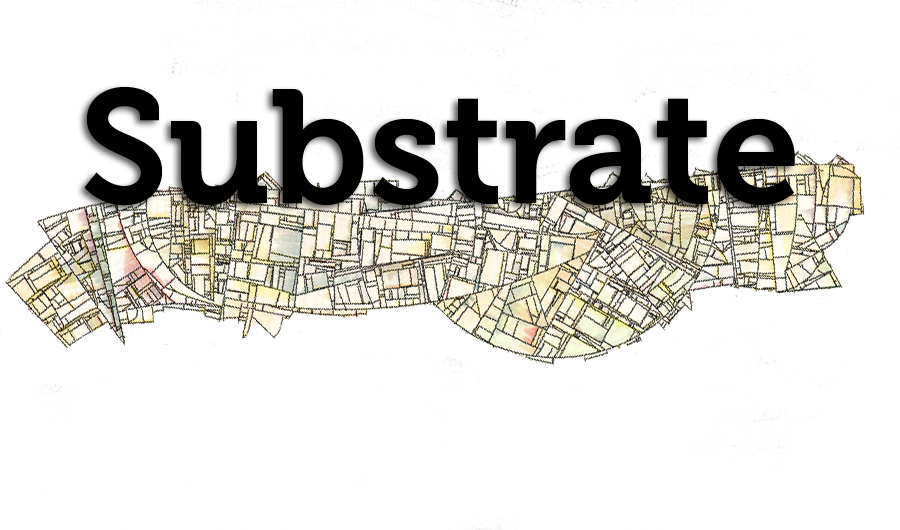
<style>
.page{position:relative;width:900px;height:530px;background:#ffffff}
.page>*{position:absolute;margin:0}
.t1{font:160px "Museo-700";color:#000000}
</style>
<div class="page">
<p class="t1" style="left:84px;top:87px;width:711px;height:119px">Substrate</p>
</div>
